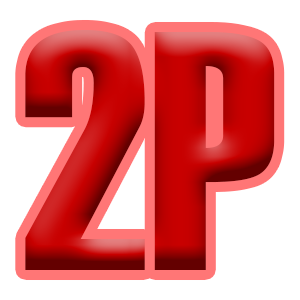
<style>
.page{position:relative;width:300px;height:300px;background:#ffffff}
.page>*{position:absolute;margin:0}
.t1{font:340.3px "Haettenschweiler"}
</style>
<div class="page">
<p class="t1" style="left:25px;top:30px;width:250px;height:240px">2P</p>
</div>
